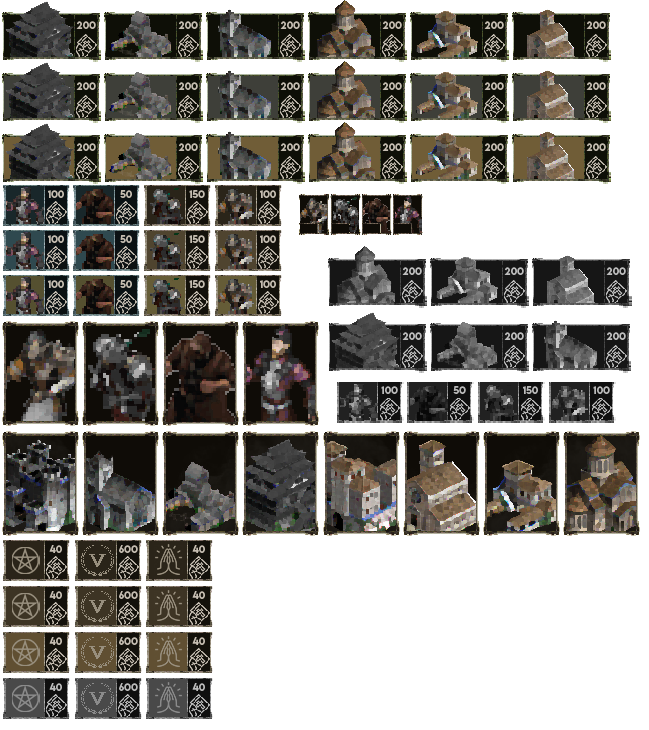
<style>
.page{position:relative;width:649px;height:730px;background:#ffffff}
.page>*{position:absolute;margin:0}
.t1{font:9.4px "LEMONMILK-Medium";color:#c5bdb1}
.t2{font:9.3px "LEMONMILK-Medium";color:#c5bdb1}
</style>
<div class="page">
<p class="t1" style="left:76px;top:21px;width:20px;height:8px">200</p>
<p class="t1" style="left:178px;top:21px;width:20px;height:8px">200</p>
<p class="t1" style="left:280px;top:21px;width:20px;height:8px">200</p>
<p class="t1" style="left:382px;top:21px;width:20px;height:8px">200</p>
<p class="t1" style="left:484px;top:21px;width:20px;height:8px">200</p>
<p class="t1" style="left:586px;top:21px;width:20px;height:8px">200</p>
<p class="t1" style="left:76px;top:82px;width:20px;height:8px">200</p>
<p class="t1" style="left:178px;top:82px;width:20px;height:8px">200</p>
<p class="t1" style="left:280px;top:82px;width:20px;height:8px">200</p>
<p class="t1" style="left:382px;top:82px;width:20px;height:8px">200</p>
<p class="t1" style="left:484px;top:82px;width:20px;height:8px">200</p>
<p class="t1" style="left:586px;top:82px;width:20px;height:8px">200</p>
<p class="t1" style="left:76px;top:143px;width:20px;height:8px">200</p>
<p class="t1" style="left:178px;top:143px;width:20px;height:8px">200</p>
<p class="t1" style="left:280px;top:143px;width:20px;height:8px">200</p>
<p class="t1" style="left:382px;top:143px;width:20px;height:8px">200</p>
<p class="t1" style="left:484px;top:143px;width:20px;height:8px">200</p>
<p class="t1" style="left:586px;top:143px;width:20px;height:8px">200</p>
<p class="t2" style="left:48px;top:190px;width:16px;height:8px">100</p>
<p class="t2" style="left:120px;top:190px;width:12px;height:8px">50</p>
<p class="t2" style="left:189px;top:190px;width:16px;height:8px">150</p>
<p class="t2" style="left:260px;top:190px;width:16px;height:8px">100</p>
<p class="t2" style="left:48px;top:235px;width:16px;height:8px">100</p>
<p class="t2" style="left:120px;top:235px;width:12px;height:8px">50</p>
<p class="t2" style="left:189px;top:235px;width:16px;height:8px">150</p>
<p class="t2" style="left:260px;top:235px;width:16px;height:8px">100</p>
<p class="t2" style="left:48px;top:280px;width:16px;height:8px">100</p>
<p class="t2" style="left:120px;top:280px;width:12px;height:8px">50</p>
<p class="t2" style="left:189px;top:280px;width:16px;height:8px">150</p>
<p class="t2" style="left:260px;top:280px;width:16px;height:8px">100</p>
<p class="t2" style="left:49px;top:545px;width:13px;height:8px">40</p>
<p class="t2" style="left:119px;top:545px;width:19px;height:8px">600</p>
<p class="t2" style="left:192px;top:545px;width:13px;height:8px">40</p>
<p class="t2" style="left:49px;top:591px;width:13px;height:8px">40</p>
<p class="t2" style="left:119px;top:591px;width:19px;height:8px">600</p>
<p class="t2" style="left:192px;top:591px;width:13px;height:8px">40</p>
<p class="t2" style="left:49px;top:637px;width:13px;height:8px">40</p>
<p class="t2" style="left:119px;top:637px;width:19px;height:8px">600</p>
<p class="t2" style="left:192px;top:637px;width:13px;height:8px">40</p>
</div>
